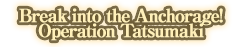
<style>
.page{position:relative;width:242px;height:47px}
.page>*{position:absolute;margin:0}
.t1{font:18px/15px "RyuminPro-ExBold";letter-spacing:-0.08em;color:#fff0b9;font-weight:bold}
</style>
<div class="page">
<p class="t1" style="left:19px;top:8px;width:204px;height:33px;text-align:center">Break into the Anchorage!<br>Operation Tatsumaki</p>
</div>
